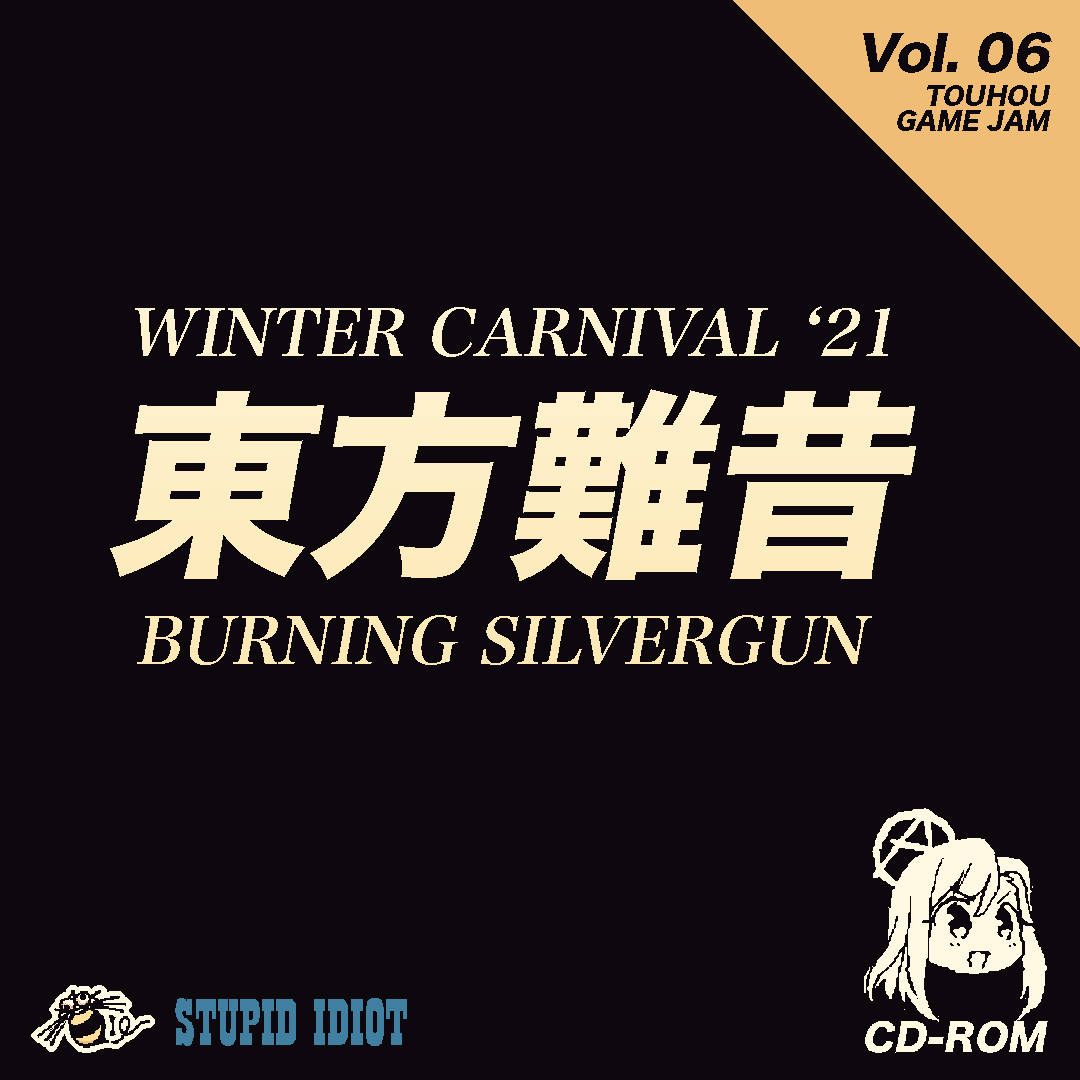
<style>
.page{position:relative;width:1080px;height:1080px;background:#0d080d}
.page>*{position:absolute;margin:0}
.t1{font:48px "HiraKakuStd-W8";color:#0d080d;font-style:italic}
.t2{font:24px/25.3px "HiraKakuStd-W8";color:#0d080d;font-style:italic}
.t3{font:64px "HiraMinProN-W6";color:#fff9e4;font-style:italic}
.t4{font:200px "HiraKakuStd-W8";color:#fdeec4;font-style:italic}
.t5{font:64px "HiraMinProN-W6";color:#fde9b7;font-style:italic}
</style>
<div class="page">
<p class="t1" style="left:863px;top:32px;width:189px;height:41px">Vol. 06</p>
<p class="t2" style="left:897px;top:85px;width:154px;height:46px;text-align:right">TOUHOU<br>GAME JAM</p>
<p class="t3" style="left:135px;top:306px;width:755px;height:51px">WINTER CARNIVAL ‘21</p>
<p class="t4" style="left:110px;top:389px;width:806px;height:192px">東方難昔</p>
<p class="t5" style="left:137px;top:615px;width:735px;height:50px">BURNING SILVERGUN</p>
</div>
